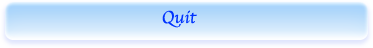
<style>
.page{position:relative;width:373px;height:48px}
.page>*{position:absolute;margin:0}
.t1{font:18px "Apple-Chancery";color:#0033ff}
</style>
<div class="page">
<p class="t1" style="left:162px;top:10px;width:35px;height:18px">Quit</p>
</div>
